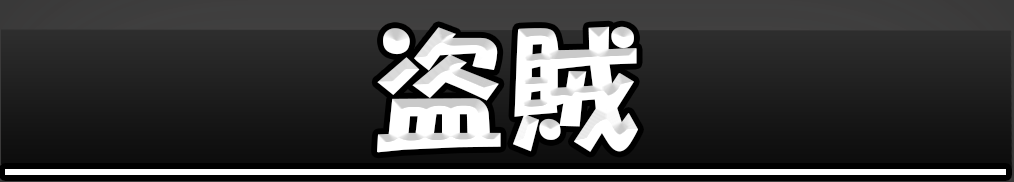
<style>
.page{position:relative;width:1014px;height:182px}
.page>*{position:absolute;margin:0}
.t1{font:130.2px "HGPSoeiKakupoptai";letter-spacing:0.05em;color:#ffffff}
</style>
<div class="page">
<p class="t1" style="left:377px;top:26px;width:261px;height:127px">盗賊</p>
</div>
